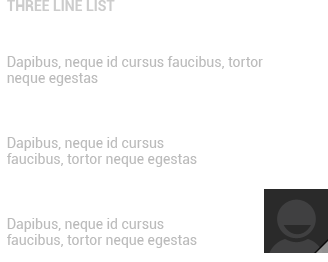
<style>
.page{position:relative;width:328px;height:262px;background:#ffffff}
.page>*{position:absolute;margin:0}
.t1{font:14px "Roboto-Bold";color:#cccccc}
.t2{font:14px/16px "Roboto-Regular";color:#bbbbbb}
</style>
<div class="page">
<p class="t1" style="left:7px;top:0px;width:108px;height:11px">THREE LINE LIST</p>
<p class="t2" style="left:7px;top:56px;width:256px;height:30px">Dapibus, neque id cursus faucibus, tortor<br>neque egestas</p>
<p class="t2" style="left:7px;top:137px;width:190px;height:30px">Dapibus, neque id cursus <br>faucibus, tortor neque egestas</p>
<p class="t2" style="left:7px;top:218px;width:190px;height:30px">Dapibus, neque id cursus <br>faucibus, tortor neque egestas</p>
</div>
